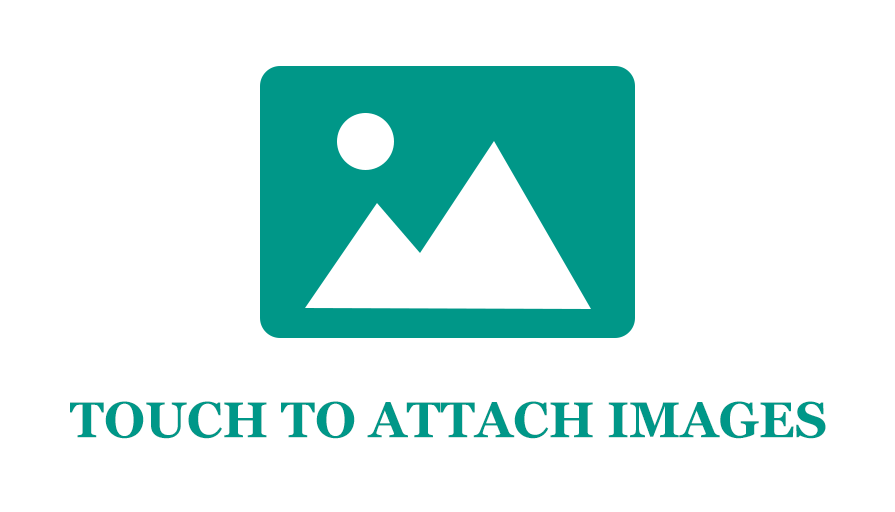
<style>
.page{position:relative;width:895px;height:512px;background:#ffffff}
.page>*{position:absolute;margin:0}
.t1{font:50px "Georgia-Bold";color:#009788}
</style>
<div class="page">
<p class="t1" style="left:70px;top:401px;width:756px;height:38px">TOUCH TO ATTACH IMAGES</p>
</div>
